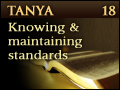
<style>
.page{position:relative;width:120px;height:90px}
.page>*{position:absolute;margin:0}
.t1{font:12px "Trajan-Bold";letter-spacing:0.01em;color:#f6ce78;text-transform:uppercase;font-weight:bold}
.t2{font:13px/14px "SanfordBook";letter-spacing:0.01em;color:#efe59d;font-weight:bold}
</style>
<div class="page">
<p class="t1" style="left:7px;top:5px;width:47px;height:11px">Tanya</p>
<p class="t1" style="left:102px;top:5px;width:14px;height:11px">18</p>
<p class="t2" style="left:8px;top:22px;width:74px;height:38px">Knowing &amp; maintaining standards</p>
</div>
